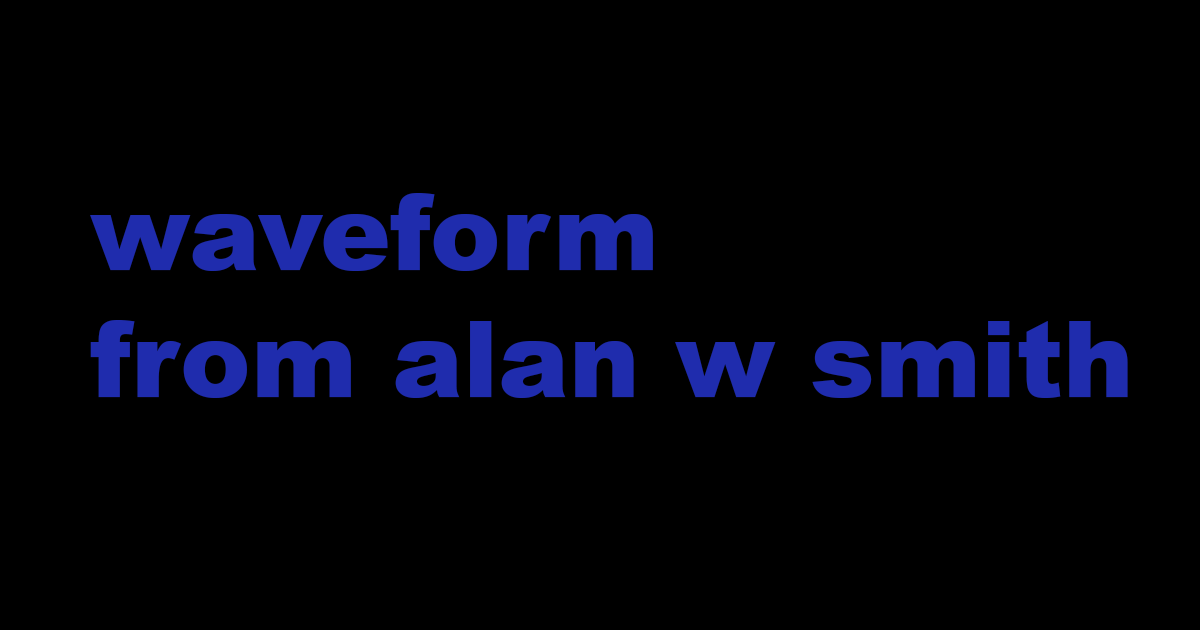
<style>
.page{position:relative;width:1200px;height:630px;background:#000000}
.page>*{position:absolute;margin:0}
.t1{font:106px "Arial-Black";color:#1f2cad}
</style>
<div class="page">
<p class="t1" style="left:90px;top:193px;width:1038px;height:205px">waveform<br>from alan w smith</p>
</div>
